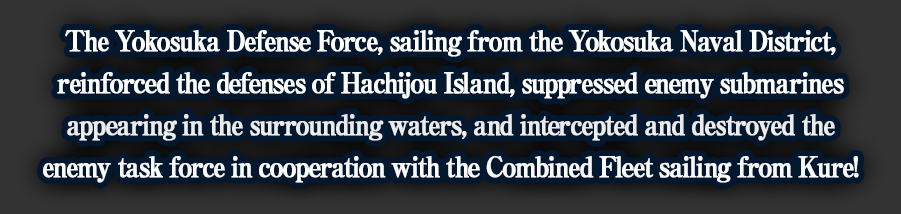
<style>
.page{position:relative;width:901px;height:214px;background:#03172f}
.page>*{position:absolute;margin:0}
.t1{font:28px/42px "RyuminPro-ExBold";letter-spacing:-0.08em;color:#ffffff;font-weight:bold;scale:0.9 1}
</style>
<div class="page">
<p class="t1" style="left:43px;top:30px;width:816px;height:153px;text-align:center">The Yokosuka Defense Force, sailing from the Yokosuka Naval District,<br>reinforced the defenses of Hachijou Island, suppressed enemy submarines<br>appearing in the surrounding waters, and intercepted and destroyed the<br>enemy task force in cooperation with the Combined Fleet sailing from Kure!</p>
</div>
